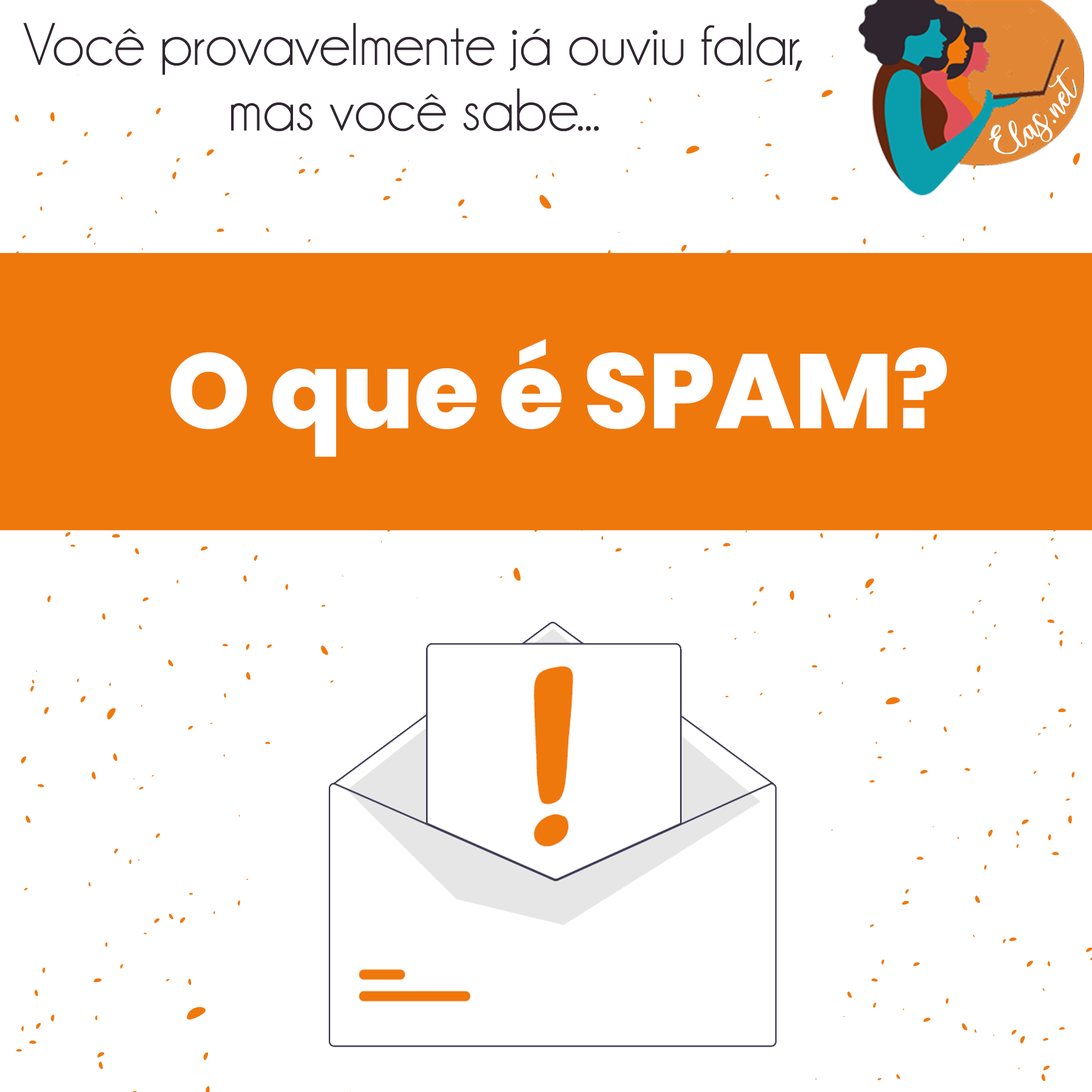
<style>
.page{position:relative;width:1092px;height:1092px;background:#ffffff}
.page>*{position:absolute;margin:0}
.t1{font:60.7px/65.5px "Champagne&Limousines";color:#2f262f}
.t2{font:25px "charlinda-Regular";color:#ffffff;scale:1.18 1}
.t3{font:105.6px "Poppins-ExtraBold";color:#ffffff}
</style>
<div class="page">
<p class="t1" style="left:23px;top:22px;width:780px;height:110px;text-align:center">Você provavelmente já ouviu falar,<br>mas você sabe...</p>
<p class="t2" style="left:989px;top:67px;width:88px;height:87px;rotate:-42deg">Elas.net</p>
<p class="t3" style="left:170px;top:339px;width:777px;height:118px">O que é SPAM?</p>
</div>
